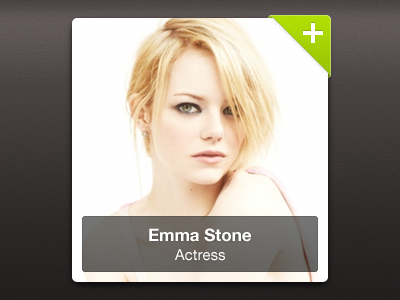
<style>
.page{position:relative;width:400px;height:300px}
.page>*{position:absolute;margin:0}
.t1{font:17px "HelveticaNeueLT-Bold";color:#ffffff}
.t2{font:15px "HelveticaNeueLT-Roman";color:#ffffff}
</style>
<div class="page">
<p class="t1" style="left:149px;top:228px;width:102px;height:14px">Emma Stone</p>
<p class="t2" style="left:174px;top:249px;width:51px;height:12px">Actress</p>
</div>
